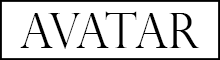
<style>
.page{position:relative;width:220px;height:60px;background:#ffffff}
.page>*{position:absolute;margin:0}
.t1{font:48px "PerpetuaTitlingMT-Light";color:#000000}
</style>
<div class="page">
<p class="t1" style="left:20px;top:11px;width:180px;height:38px">AVATAR</p>
</div>
